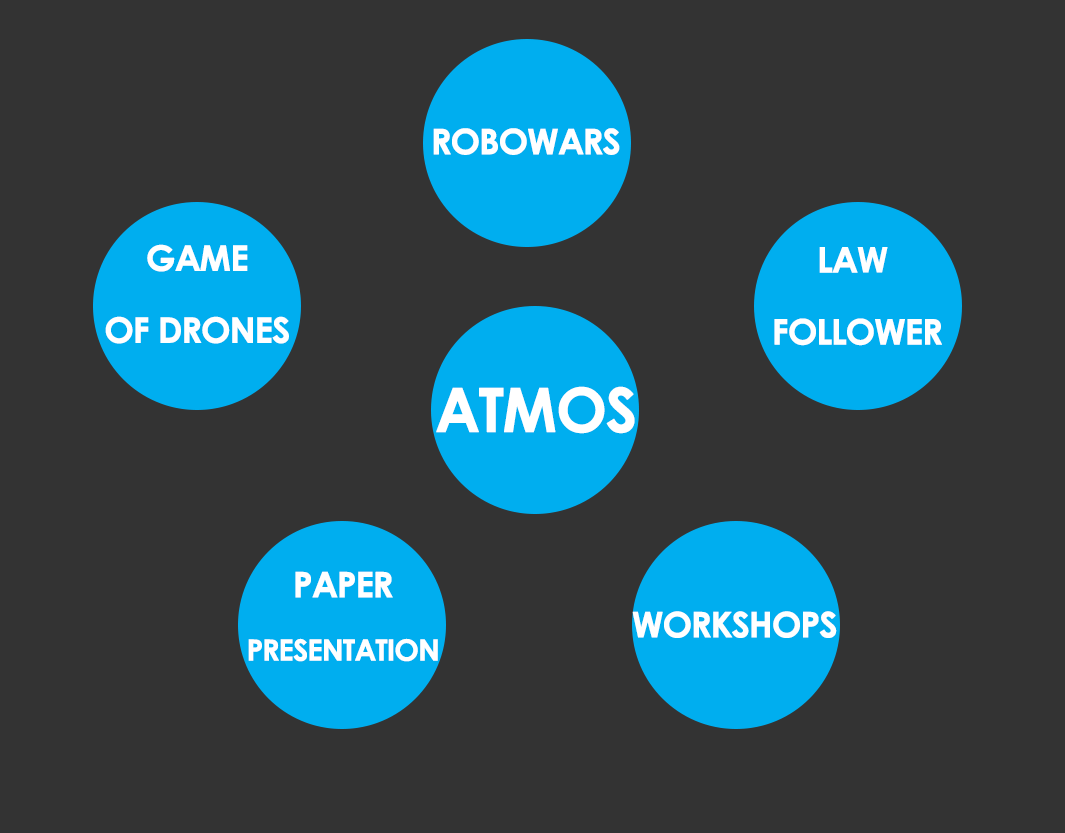
<style>
.page{position:relative;width:1065px;height:833px;background:#333333}
.page>*{position:absolute;margin:0}
.t1{font:60px "CenturyGothic-Bold";letter-spacing:-0.05em;color:#ffffff;font-weight:bold}
.t2{font:104.1px "CenturyGothic-Bold";letter-spacing:-0.05em;color:#ffffff;font-weight:bold}
.t3{font:50px "CenturyGothic-Bold";letter-spacing:-0.05em;color:#ffffff;font-weight:bold}
</style>
<div class="page">
<p class="t1" style="left:433px;top:128px;width:187px;height:27px">ROBOWARS</p>
<p class="t1" style="left:105px;top:244px;width:184px;height:100px;text-align:center">GAME<br>OF DRONES</p>
<p class="t1" style="left:774px;top:247px;width:168px;height:99px;text-align:center">LAW <br>FOLLOWER</p>
<p class="t2" style="left:436px;top:386px;width:199px;height:48px">ATMOS</p>
<p class="t3" style="left:248px;top:571px;width:190px;height:91px;text-align:center"><span class="t1">PAPER<br></span>PRESENTATION</p>
<p class="t1" style="left:632px;top:611px;width:205px;height:27px">WORKSHOPS</p>
</div>
